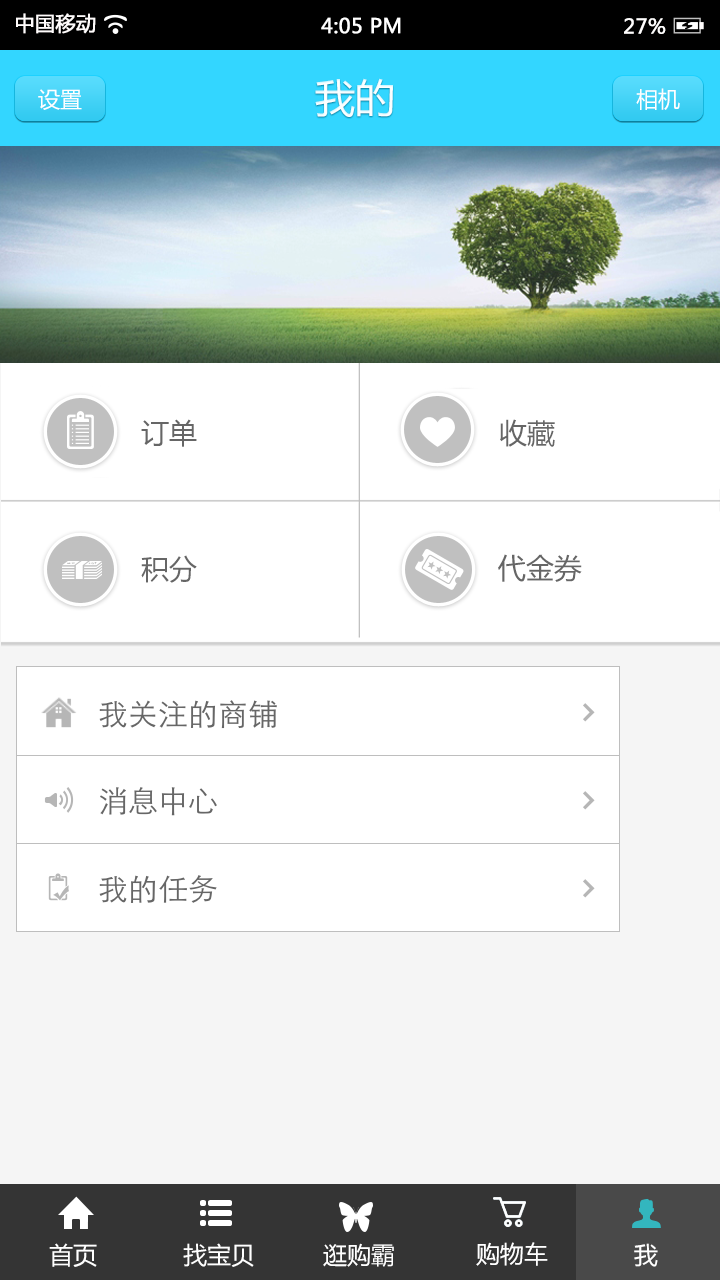
<style>
.page{position:relative;width:720px;height:1280px;background:#ffffff}
.page>*{position:absolute;margin:0}
.t1{font:20px "MicrosoftYaHei";color:#fffcfc;font-weight:bold}
.t2{font:20px "MicrosoftYaHei";color:#ffffff;font-weight:bold}
.t3{font:20px "MicrosoftYaHei";color:#fffefe;font-weight:bold}
.t4{font:40px "MicrosoftYaHei";color:#ffffff}
.t5{font:22px "MicrosoftYaHei";color:#ffffff}
.t6{font:28px "MicrosoftYaHei";color:#666666}
.t7{font:24px "MicrosoftYaHei";color:#ffffff}
</style>
<div class="page">
<p class="t1" style="left:16px;top:13px;width:80px;height:21px">中国移动</p>
<p class="t2" style="left:321px;top:17px;width:80px;height:17px">4:05 PM</p>
<p class="t3" style="left:624px;top:18px;width:42px;height:16px">27%</p>
<p class="t4" style="left:315px;top:78px;width:78px;height:39px">我的</p>
<p class="t5" style="left:38px;top:89px;width:44px;height:21px">设置</p>
<p class="t5" style="left:636px;top:88px;width:44px;height:22px">相机</p>
<p class="t6" style="left:141px;top:419px;width:56px;height:28px">订单</p>
<p class="t6" style="left:500px;top:419px;width:55px;height:28px">收藏</p>
<p class="t6" style="left:141px;top:555px;width:56px;height:28px">积分</p>
<p class="t6" style="left:498px;top:554px;width:84px;height:28px">代金券</p>
<p class="t7" style="left:49px;top:1243px;width:48px;height:24px">首页</p>
<p class="t7" style="left:183px;top:1243px;width:71px;height:24px">找宝贝</p>
<p class="t7" style="left:323px;top:1243px;width:71px;height:24px">逛购霸</p>
<p class="t7" style="left:476px;top:1242px;width:72px;height:24px">购物车</p>
<p class="t7" style="left:634px;top:1243px;width:24px;height:24px">我</p>
</div>
